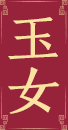
<style>
.page{position:relative;width:68px;height:130px;background:#96233a}
.page>*{position:absolute;margin:0}
.t1{font:56px/58.4px "MFKeSong_Noncommercial-Bold";letter-spacing:-0.07em;color:#f9e2a2}
</style>
<div class="page">
<p class="t1" style="left:8px;top:17px;width:52px;height:97px;text-align:center">玉女</p>
</div>
